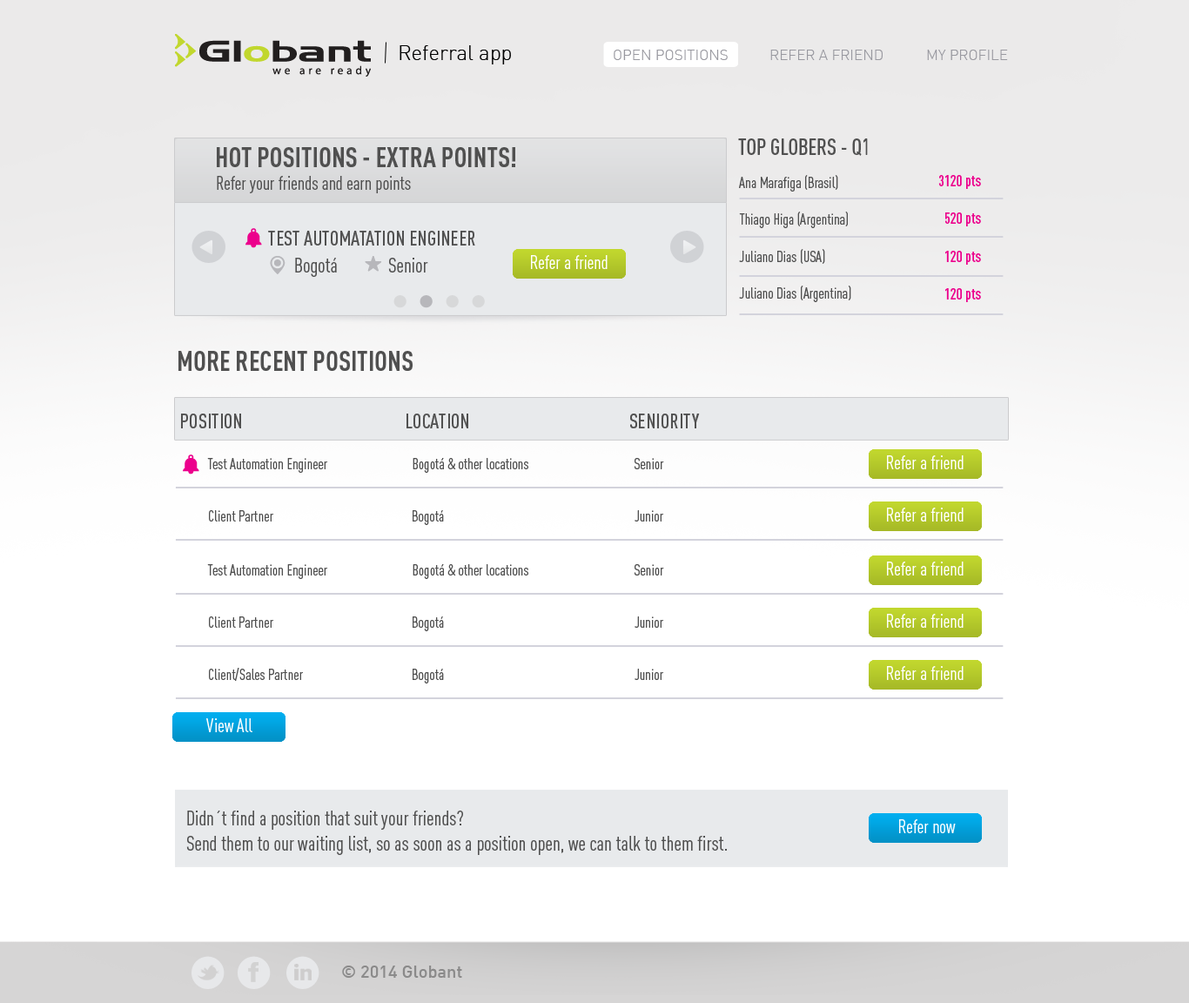
<style>
.page{position:relative;width:1189px;height:1003px;background:#ffffff}
.page>*{position:absolute;margin:0}
.t1{font:20.9px "DIN-Light";color:#000000}
.t2{font:14.8px "DIN-Light";color:#9999a0}
.t3{font:27.9px "DINCond-Bold";color:#505050}
.t4{font:22.6px "DINCond-Medium";color:#505050}
.t5{font:19.2px "DINCond-Regular";color:#505050}
.t6{font:15.7px/18.5px "DINCond-Regular";color:#505050}
.t7{font:15.7px "DINCond-Medium";color:#ec008c}
.t8{font:20.9px "DINCond-Medium";color:#505050}
.t9{font:20.9px "DINCond-Regular";color:#505050}
.t10{font:19.2px "DINCond-Regular";color:#ffffff}
.t11{font:15.7px "DINCond-Regular";color:#505050}
.t12{font:17.4px "DIN-Medium";color:#8b8a8a}
</style>
<div class="page">
<p class="t1" style="left:400px;top:45px;width:111px;height:19px">Referral app</p>
<p class="t2" style="left:614px;top:50px;width:394px;height:10px">OPEN POSITIONS   REFER A FRIEND  MY PROFILE</p>
<p class="t3" style="left:217px;top:147px;width:298px;height:20px">HOT POSITIONS - EXTRA POINTS!</p>
<p class="t4" style="left:738px;top:138px;width:130px;height:18px">TOP GLOBERS - Q1</p>
<p class="t5" style="left:217px;top:176px;width:194px;height:17px">Refer your friends and earn points</p>
<p class="t6" style="left:739px;top:175px;width:112px;height:127px">Ana Marafiga (Brasil)  <br><br>Thiago Higa (Argentina)<br><br>Juliano Dias (USA)<br><br>Juliano Dias (Argentina)</p>
<p class="t7" style="left:938px;top:175px;width:43px;height:14px">3120 pts</p>
<p class="t7" style="left:945px;top:212px;width:36px;height:14px">520 pts</p>
<p class="t8" style="left:268px;top:231px;width:207px;height:14px">TEST AUTOMATATION ENGINEER</p>
<p class="t9" style="left:295px;top:258px;width:133px;height:19px"><span class="t8"><br><br> </span>Bogotá  Senior</p>
<p class="t10" style="left:531px;top:255px;width:77px;height:14px">Refer a friend</p>
<p class="t7" style="left:945px;top:251px;width:36px;height:14px">120 pts</p>
<p class="t7" style="left:945px;top:288px;width:36px;height:14px">120 pts</p>
<p class="t3" style="left:178px;top:351px;width:235px;height:20px">MORE RECENT POSITIONS</p>
<p class="t8" style="left:181px;top:413px;width:60px;height:15px">POSITION</p>
<p class="t8" style="left:407px;top:413px;width:61px;height:15px">LOCATION</p>
<p class="t8" style="left:630px;top:413px;width:70px;height:15px">SENIORITY</p>
<p class="t11" style="left:207px;top:458px;width:120px;height:15px">Test Automation Engineer</p>
<p class="t11" style="left:413px;top:458px;width:115px;height:15px">Bogotá &amp; other locations</p>
<p class="t11" style="left:634px;top:458px;width:30px;height:11px">Senior</p>
<p class="t10" style="left:887px;top:455px;width:77px;height:14px">Refer a friend</p>
<p class="t10" style="left:887px;top:507px;width:77px;height:14px">Refer a friend</p>
<p class="t11" style="left:209px;top:510px;width:64px;height:11px">Client Partner</p>
<p class="t11" style="left:413px;top:510px;width:31px;height:15px">Bogotá</p>
<p class="t11" style="left:635px;top:510px;width:28px;height:11px">Junior</p>
<p class="t11" style="left:207px;top:564px;width:120px;height:15px">Test Automation Engineer</p>
<p class="t11" style="left:413px;top:564px;width:115px;height:15px">Bogotá &amp; other locations</p>
<p class="t11" style="left:634px;top:564px;width:30px;height:11px">Senior</p>
<p class="t10" style="left:887px;top:561px;width:77px;height:14px">Refer a friend</p>
<p class="t11" style="left:209px;top:616px;width:64px;height:12px">Client Partner</p>
<p class="t11" style="left:413px;top:616px;width:31px;height:15px">Bogotá</p>
<p class="t11" style="left:635px;top:616px;width:28px;height:12px">Junior</p>
<p class="t10" style="left:887px;top:614px;width:77px;height:14px">Refer a friend</p>
<p class="t10" style="left:887px;top:666px;width:77px;height:14px">Refer a friend</p>
<p class="t11" style="left:209px;top:668px;width:94px;height:13px">Client/Sales Partner</p>
<p class="t11" style="left:413px;top:669px;width:31px;height:14px">Bogotá</p>
<p class="t11" style="left:635px;top:669px;width:28px;height:11px">Junior</p>
<p class="t10" style="left:206px;top:718px;width:46px;height:14px">View All</p>
<p class="t9" style="left:186px;top:810px;width:541px;height:45px">Didn´t find a position that suit your friends?<br>Send them to our waiting list, so as soon as a position open, we can talk to them first.</p>
<p class="t10" style="left:899px;top:819px;width:57px;height:14px">Refer now</p>
<p class="t12" style="left:342px;top:965px;width:120px;height:13px">© 2014 Globant</p>
</div>
